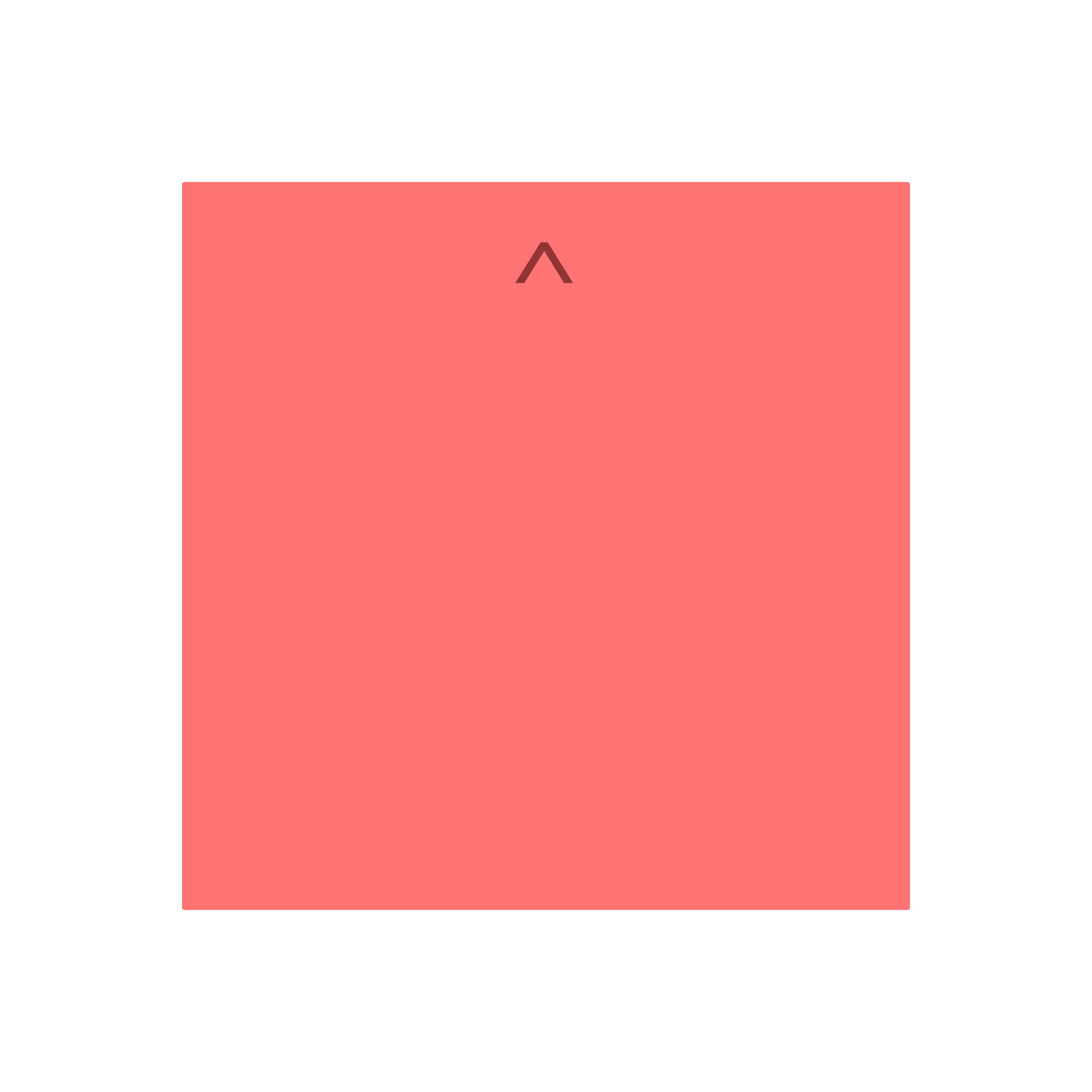
<style>
.page{position:relative;width:1092px;height:1092px;background:#ffffff}
.page>*{position:absolute;margin:0}
.t1{font:126.4px "Georgia";letter-spacing:-0.03em;color:#933434}
</style>
<div class="page">
<p class="t1" style="left:515px;top:242px;width:58px;height:41px">^</p>
</div>
